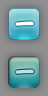
<style>
.page{position:relative;width:48px;height:96px}
.page>*{position:absolute;margin:0}
.t1{font:24px "DFMaruMoji-W9-WING-RKSJ-H";color:#ffffff;font-weight:bold}
.t2{font:24px "DFMaruMoji-W9-WING-RKSJ-H";color:#b5e3e9;font-weight:bold}
</style>
<div class="page">
<p class="t1" style="left:15px;top:21px;width:19px;height:5px">－</p>
<p class="t2" style="left:15px;top:69px;width:19px;height:5px">－</p>
</div>
